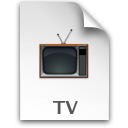
<style>
.page{position:relative;width:128px;height:128px;background:#ffffff}
.page>*{position:absolute;margin:0}
.t1{font:18px "LucidaGrande-Bold";color:#575757}
</style>
<div class="page">
<p class="t1" style="left:53px;top:101px;width:25px;height:13px">TV</p>
</div>
